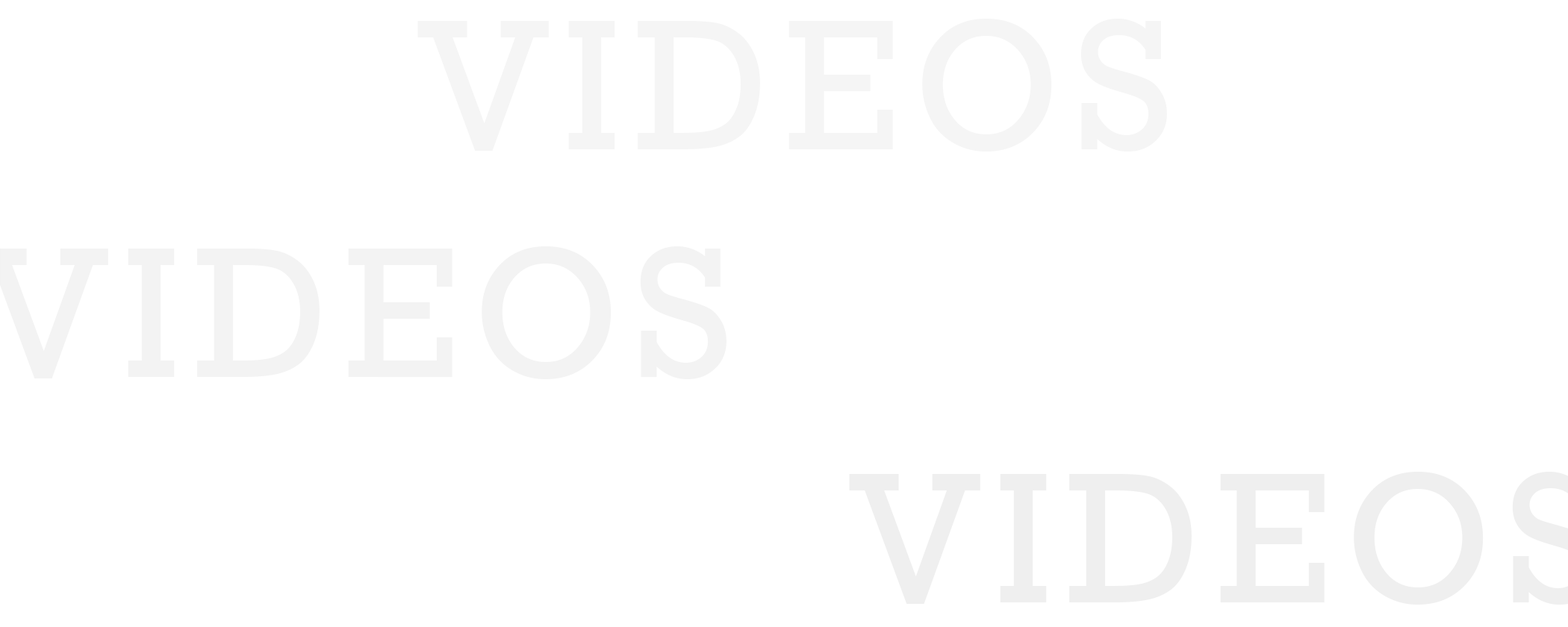
<style>
.page{position:relative;width:1568px;height:627px;background:#ffffff}
.page>*{position:absolute;margin:0}
.t1{font:188.7px "Rockwell";letter-spacing:0.08em;color:#f5f5f5}
</style>
<div class="page">
<p class="t1" style="left:417px;top:19px;width:750px;height:133px">VIDEOS</p>
</div>
